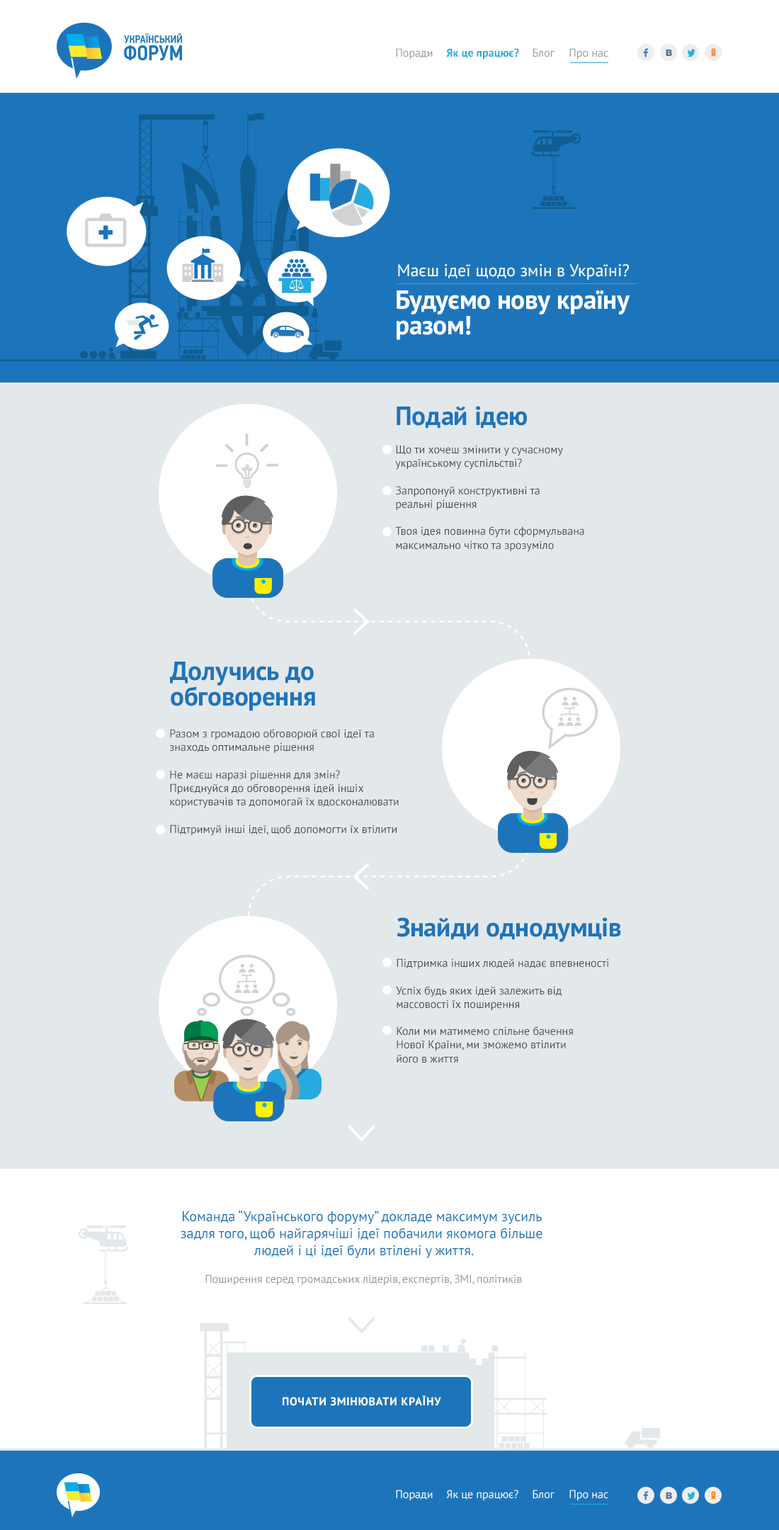
<style>
.page{position:relative;width:779px;height:1530px;background:#e3e8eb}
.page>*{position:absolute;margin:0}
.t1{font:11.3px "PTSans-Regular";color:#929497}
.t2{font:11.3px "PTSans-Bold";color:#27aae0}
.t3{font:9.1px "Arial-Black";color:#507297}
.t4{font:17px "PTSans-Regular";color:#ffffff}
.t5{font:26.5px/25.5px "PTSans-Bold";letter-spacing:-0.01em;color:#ffffff}
.t6{font:26.5px "PTSans-Bold";letter-spacing:-0.01em;color:#1c75bb}
.t7{font:11.3px "PTSans-Regular";color:#4a4a4a}
.t8{font:26.5px/25.5px "PTSans-Bold";letter-spacing:-0.01em;color:#1c75bb}
.t9{font:14.2px "PTSans-Regular";color:#1c75bb}
.t10{font:11.3px "PTSans-Bold";letter-spacing:0.05em;color:#ffffff;text-transform:uppercase}
.t11{font:11.3px "PTSans-Regular";color:#ffffff}
</style>
<div class="page">
<p class="t1" style="left:396px;top:48px;width:37px;height:12px">Поради</p>
<p class="t2" style="left:446px;top:48px;width:73px;height:12px">Як це працює?</p>
<p class="t1" style="left:533px;top:48px;width:22px;height:9px">Блог</p>
<p class="t1" style="left:570px;top:48px;width:39px;height:12px">Про нас</p>
<p class="t3" style="left:666px;top:49px;width:6px;height:7px">B</p>
<p class="t4" style="left:398px;top:264px;width:231px;height:16px">Маєш ідеї щодо змін в Україні?</p>
<p class="t5" style="left:397px;top:290px;width:233px;height:50px">Будуємо нову країну <br>разом!</p>
<p class="t6" style="left:397px;top:406px;width:130px;height:23px">Подай ідею</p>
<p class="t7" style="left:395px;top:445px;width:189px;height:107px">Що ти хочеш змінити у сучасному <br>українському суспільстві?<br><br>Запропонуй конструктивні та <br>реальні рішення<br><br>Твоя ідея повинна бути сформульвана <br>максимально чітко та зрозуміло</p>
<p class="t8" style="left:170px;top:662px;width:145px;height:49px">Долучись до <br>обговорення</p>
<p class="t7" style="left:169px;top:729px;width:230px;height:107px">Разом з громадою обговорюй свої ідеї та <br>знаходь оптимальне рішення<br><br>Не маєш наразі рішення для змін?<br>Приєднуйся до обговорення ідей іншіх <br>користувачів та допомогай їх вдосконалювати<br><br>Підтримуй інші ідеї, щоб допомогти їх втілити</p>
<p class="t6" style="left:397px;top:917px;width:224px;height:25px">Знайди однодумців</p>
<p class="t7" style="left:396px;top:958px;width:213px;height:105px">Підтримка інших людей надає впевненості<br><br>Успіх будь яких ідей залежить від <br>массовості їх поширення<br><br>Коли ми матимемо спільне бачення <br>Нової Країни, ми зможемо втілити <br>його в життя</p>
<p class="t9" style="left:181px;top:1210px;width:362px;height:76px;text-align:center">Команда “Українського форуму” докладе максимум зусиль <br>задля того, щоб найгарячіші ідеї побачили якомога більше <br>людей і ці ідеї були втілені у життя.<br><span class="t1"><br>Поширення серед громадських лідерів, експертів, ЗМІ, політиків</span></p>
<p class="t10" style="left:283px;top:1396px;width:158px;height:10px">Почати змінювати країну</p>
<p class="t11" style="left:396px;top:1490px;width:37px;height:11px">Поради</p>
<p class="t11" style="left:446px;top:1490px;width:73px;height:11px">Як це працює?</p>
<p class="t11" style="left:533px;top:1490px;width:22px;height:9px">Блог</p>
<p class="t11" style="left:570px;top:1490px;width:39px;height:11px">Про нас</p>
<p class="t3" style="left:666px;top:1492px;width:6px;height:7px">B</p>
</div>
